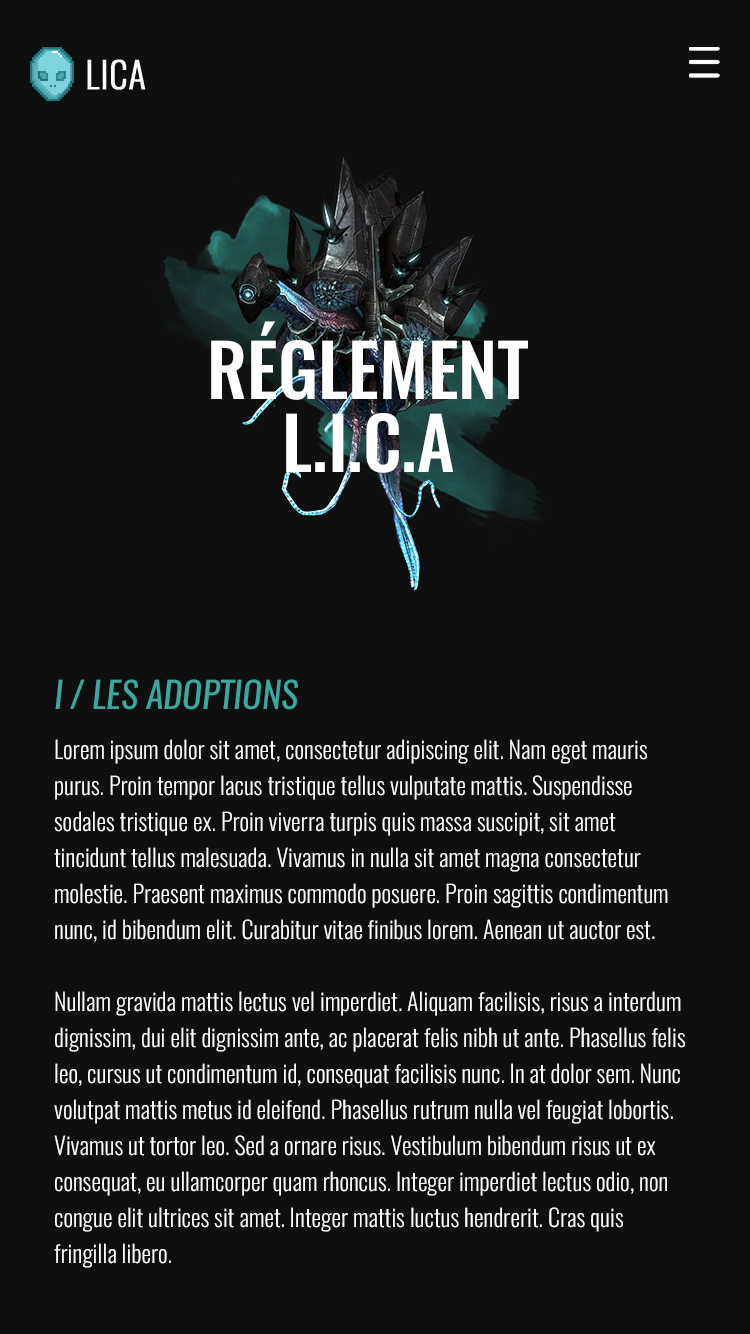
<style>
.page{position:relative;width:750px;height:1334px;background:#0f0f0f}
.page>*{position:absolute;margin:0}
.t1{font:72px "Oswald-Medium";color:#ffffff;text-transform:uppercase}
.t2{font:36px "Oswald-RegularItalic";color:#3aa89c;text-transform:uppercase}
.t3{font:24px/36px "Oswald-Light";color:#ffffff}
</style>
<div class="page">
<p class="t1" style="left:211px;top:321px;width:317px;height:79px">réglement</p>
<p class="t1" style="left:286px;top:413px;width:167px;height:60px">L.I.C.A</p>
<p class="t2" style="left:55px;top:679px;width:243px;height:31px">I / les adoptions</p>
<p class="t3" style="left:54px;top:739px;width:631px;height:529px">Lorem ipsum dolor sit amet, consectetur adipiscing elit. Nam eget mauris purus. Proin tempor lacus tristique tellus vulputate mattis. Suspendisse sodales tristique ex. Proin viverra turpis quis massa suscipit, sit amet tincidunt tellus malesuada. Vivamus in nulla sit amet magna consectetur molestie. Praesent maximus commodo posuere. Proin sagittis condimentum nunc, id bibendum elit. Curabitur vitae finibus lorem. Aenean ut auctor est.<br><br>Nullam gravida mattis lectus vel imperdiet. Aliquam facilisis, risus a interdum dignissim, dui elit dignissim ante, ac placerat felis nibh ut ante. Phasellus felis leo, cursus ut condimentum id, consequat facilisis nunc. In at dolor sem. Nunc volutpat mattis metus id eleifend. Phasellus rutrum nulla vel feugiat lobortis. Vivamus ut tortor leo. Sed a ornare risus. Vestibulum bibendum risus ut ex consequat, eu ullamcorper quam rhoncus. Integer imperdiet lectus odio, non congue elit ultrices sit amet. Integer mattis luctus hendrerit. Cras quis fringilla libero.</p>
</div>
